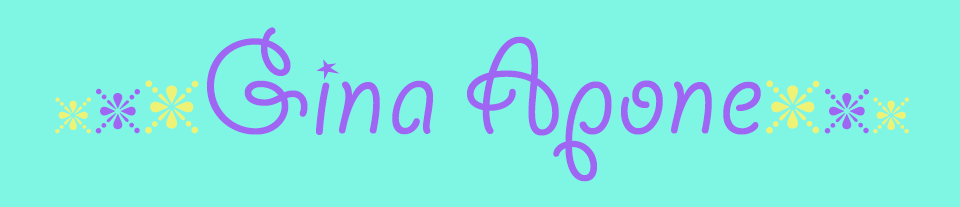
<style>
.page{position:relative;width:960px;height:207px;background:#7ef6e3}
.page>*{position:absolute;margin:0}
.t1{font:150.5px "GiddyupStd";color:#9e66f2}
.t2{font:50.2px "MonotypeSorts";color:#eef275}
.t3{font:62.7px "MonotypeSorts";color:#9e66f2}
.t4{font:75.3px "MonotypeSorts";color:#eef275}
</style>
<div class="page">
<p class="t1" style="left:55px;top:27px;width:854px;height:155px"><span class="t2">h</span><span class="t3">h</span><span class="t4">h</span>Gina Apone<span class="t4">h</span><span class="t3">h</span><span class="t2">h</span></p>
</div>
